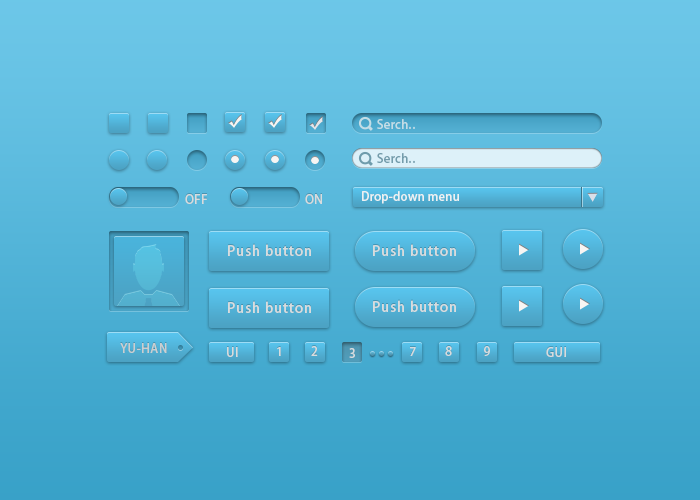
<style>
.page{position:relative;width:700px;height:500px}
.page>*{position:absolute;margin:0}
.t1{font:12px "AdobeHeitiStd-Regular";letter-spacing:0.025em;color:#c3dde6}
.t2{font:12px "AdobeHeitiStd-Regular";letter-spacing:0.025em;color:#739cab}
.t3{font:12px "AdobeHeitiStd-Regular";letter-spacing:0.05em;color:#d7dcde}
.t4{font:12px "AdobeHeitiStd-Regular";letter-spacing:0.01em;color:#edf1f2}
.t5{font:14px "AdobeHeitiStd-Regular";letter-spacing:0.05em;color:#d7dcde}
.t6{font:12px "AdobeHeitiStd-Regular";letter-spacing:0.05em;color:#cacfd1}
</style>
<div class="page">
<p class="t1" style="left:377px;top:119px;width:38px;height:10px">Serch..</p>
<p class="t2" style="left:377px;top:153px;width:38px;height:10px">Serch..</p>
<p class="t3" style="left:185px;top:194px;width:22px;height:10px">OFF</p>
<p class="t3" style="left:305px;top:194px;width:17px;height:10px">ON</p>
<p class="t4" style="left:362px;top:191px;width:97px;height:13px">Drop-down menu</p>
<p class="t5" style="left:228px;top:244px;width:83px;height:12px">Push button</p>
<p class="t5" style="left:373px;top:244px;width:83px;height:12px">Push button</p>
<p class="t5" style="left:228px;top:301px;width:83px;height:12px">Push button</p>
<p class="t5" style="left:373px;top:300px;width:83px;height:12px">Push button</p>
<p class="t6" style="left:120px;top:343px;width:47px;height:10px">YU-HAN</p>
<p class="t3" style="left:227px;top:347px;width:11px;height:10px">UI</p>
<p class="t3" style="left:277px;top:346px;width:213px;height:10px">1        2                            7         8         9</p>
<p class="t3" style="left:349px;top:348px;width:6px;height:10px">3</p>
<p class="t3" style="left:546px;top:347px;width:20px;height:10px">GUI</p>
</div>
